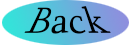
<style>
.page{position:relative;width:130px;height:45px}
.page>*{position:absolute;margin:0}
.t1{font:37.1px "Sylfaen";color:#000000}
</style>
<div class="page">
<p class="t1" style="left:24px;top:6px;width:87px;height:28px">Back</p>
</div>
